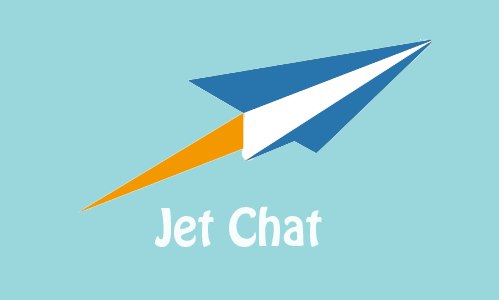
<style>
.page{position:relative;width:499px;height:300px;background:#99d7dc}
.page>*{position:absolute;margin:0}
.t1{font:46px "HoboStd";color:#f7fcfc}
</style>
<div class="page">
<p class="t1" style="left:154px;top:206px;width:168px;height:41px">Jet Chat</p>
</div>
